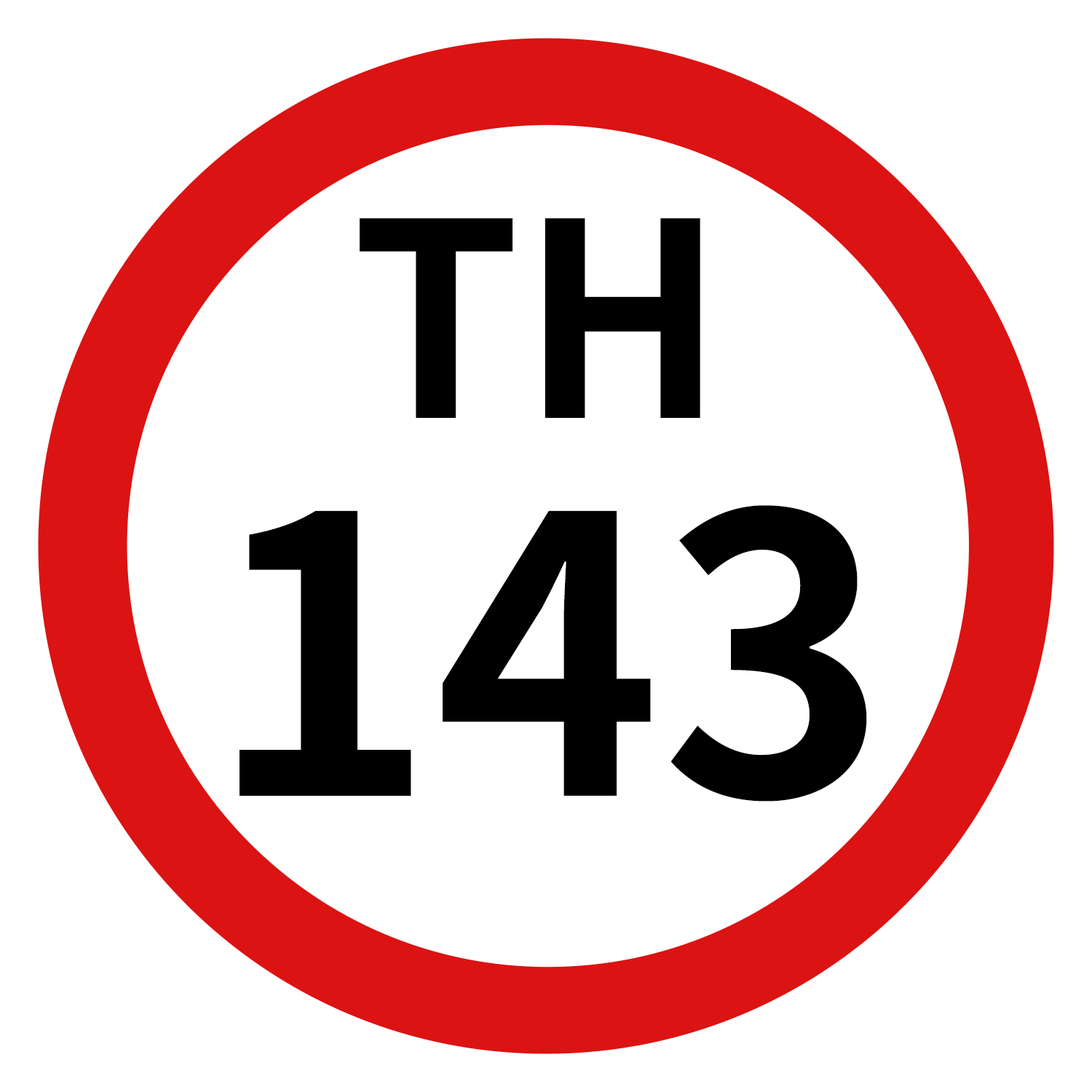
<style>
.page{position:relative;width:1092px;height:1092px;background:#ffffff}
.page>*{position:absolute;margin:0}
.t1{font:269.8px "NotoSansJP-Bold";color:#000000}
.t2{font:384.8px "NotoSansJP-Bold";color:#000000}
</style>
<div class="page">
<p class="t1" style="left:360px;top:218px;width:340px;height:200px">TH</p>
<p class="t2" style="left:240px;top:505px;width:627px;height:297px">143</p>
</div>
